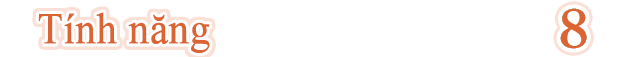
<style>
.page{position:relative;width:624px;height:57px;background:#ffffff}
.page>*{position:absolute;margin:0}
.t1{font:44px "TimesNewRomanPSMT";color:#dc6432;font-weight:bold;scale:0.91 1}
</style>
<div class="page">
<p class="t1" style="left:38px;top:12px;width:172px;height:41px">Tính năng</p>
</div>
